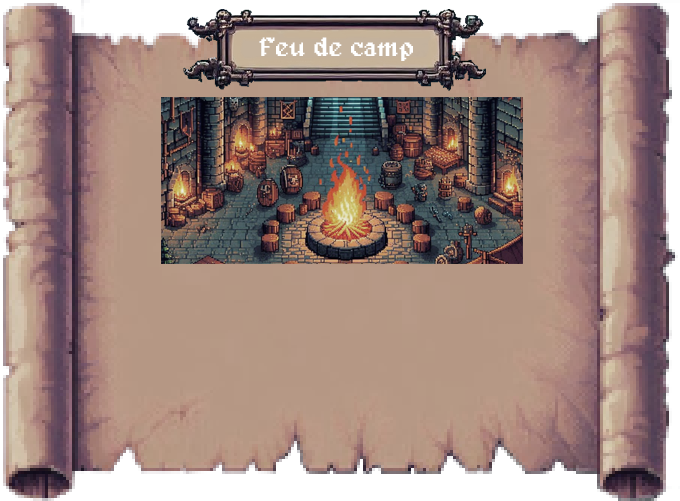
<style>
.page{position:relative;width:680px;height:501px}
.page>*{position:absolute;margin:0}
.t1{font:26.7px "Alagard";color:#ffffff}
</style>
<div class="page">
<p class="t1" style="left:259px;top:37px;width:154px;height:24px">Feu de camp</p>
</div>
